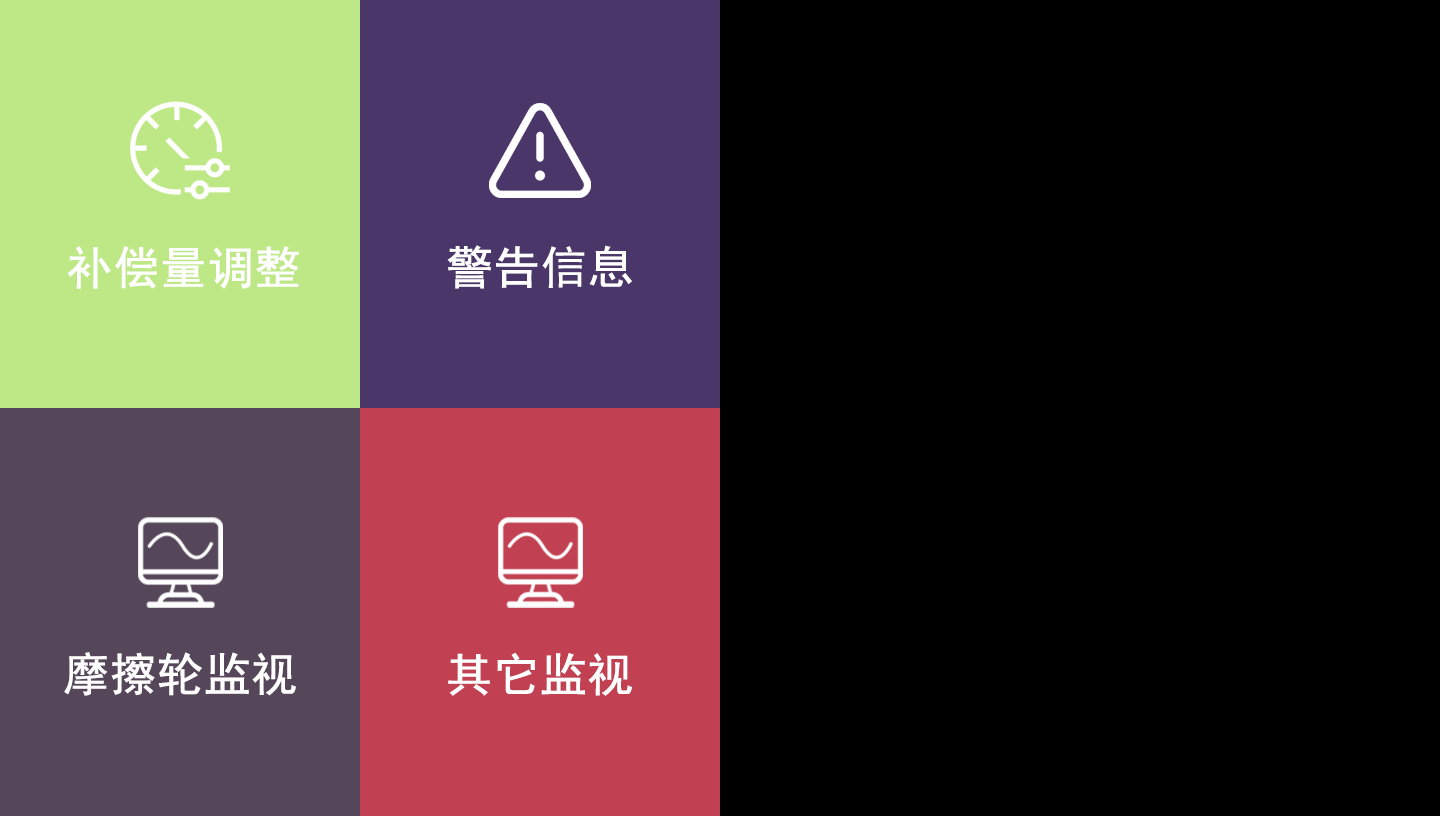
<style>
.page{position:relative;width:1440px;height:816px;background:#000000}
.page>*{position:absolute;margin:0}
.t1{font:45.8px "SimHei";color:#ffffff;font-weight:bold}
</style>
<div class="page">
<p class="t1" style="left:67px;top:246px;width:232px;height:43px">补偿量调整</p>
<p class="t1" style="left:447px;top:245px;width:185px;height:44px">警告信息</p>
<p class="t1" style="left:64px;top:652px;width:232px;height:44px">摩擦轮监视</p>
<p class="t1" style="left:448px;top:652px;width:184px;height:44px">其它监视</p>
</div>
